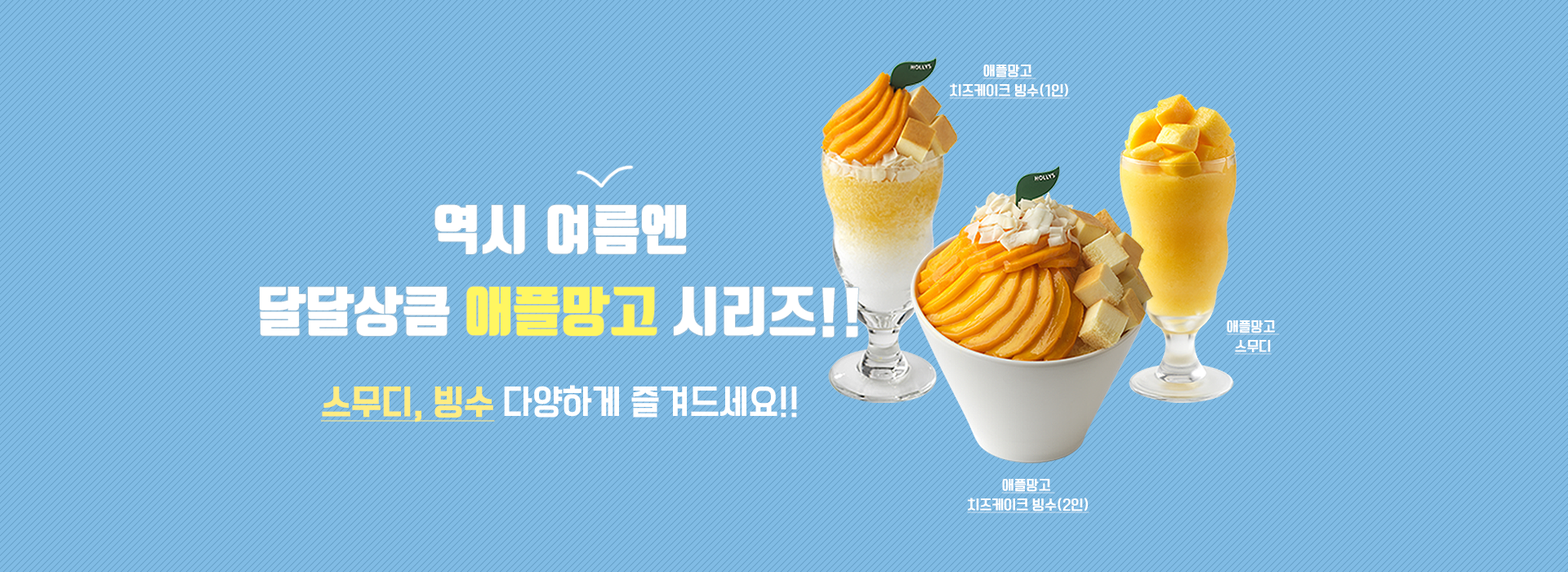
<style>
.page{position:relative;width:1568px;height:572px}
.page>*{position:absolute;margin:0}
.t1{font:13.1px/19.6px "TTManbalchungchunL";letter-spacing:0.005em;color:#ffffff;font-weight:bold;text-decoration:underline}
.t2{font:53.1px/81.7px "TmonMonsoriBlack";letter-spacing:0.005em;color:#ffffff}
.t3{font:53.1px/81.7px "TmonMonsoriBlack";letter-spacing:0.005em;color:#fff661}
.t4{font:32.7px "TTManbalchungchunR";letter-spacing:0.005em;color:#ffffff}
.t5{font:32.7px "TTManbalchungchunR";letter-spacing:0.005em;color:#ffec83;font-weight:bold;text-decoration:underline}
</style>
<div class="page">
<p class="t1" style="left:949px;top:65px;width:121px;height:34px;text-align:center">애플망고 <br>치즈케이크 빙수(1인)</p>
<p class="t2" style="left:260px;top:204px;width:598px;height:133px;text-align:center">역시 여름엔<br>달달상큼 <span class="t3">애플망고</span> 시리즈!!</p>
<p class="t1" style="left:1226px;top:320px;width:54px;height:34px;text-align:center">애플망고 <br>스무디</p>
<p class="t4" style="left:321px;top:385px;width:476px;height:37px"><span class="t5">스무디, 빙수 </span>다양하게 즐겨드세요!!</p>
<p class="t1" style="left:967px;top:479px;width:122px;height:34px;text-align:center">애플망고 <br>치즈케이크 빙수(2인)</p>
</div>
